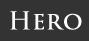
<style>
.page{position:relative;width:89px;height:41px;background:#333333}
.page>*{position:absolute;margin:0}
.t1{font:24px "TrajanPro-Regular";color:#fefefe;font-weight:bold}
</style>
<div class="page">
<p class="t1" style="left:10px;top:11px;width:72px;height:19px">Hero</p>
</div>
